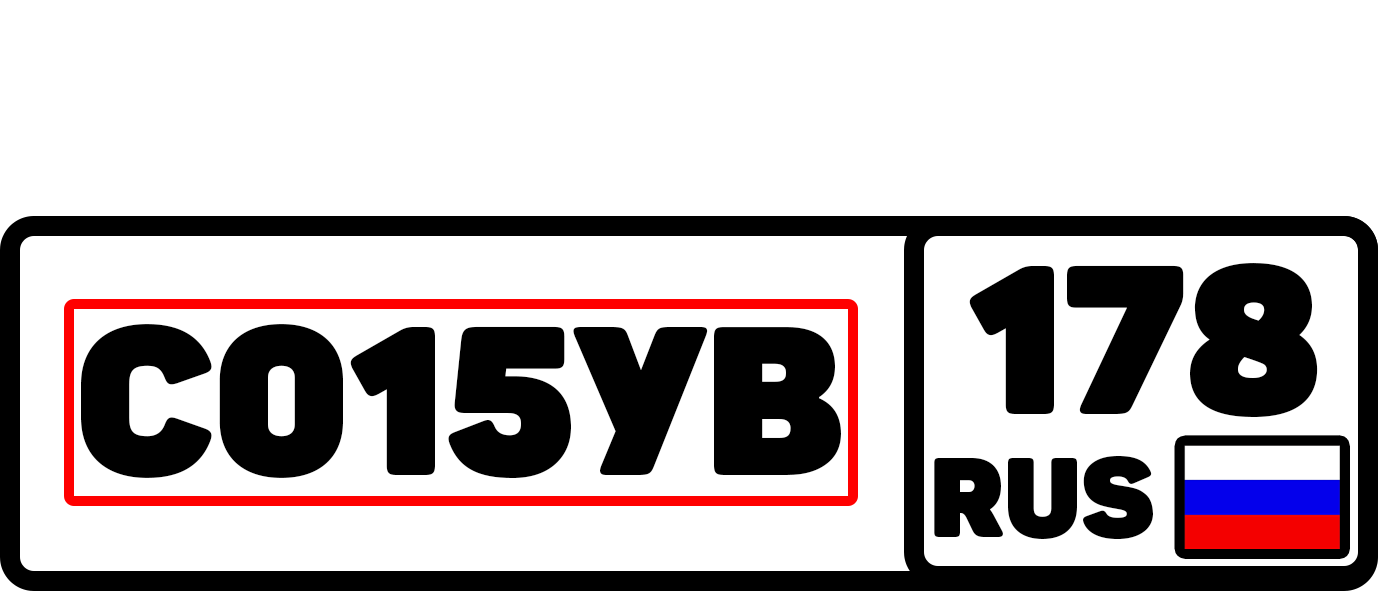
<style>
.page{position:relative;width:1378px;height:591px;background:#ffffff}
.page>*{position:absolute;margin:0}
.t1{font:208.3px "Panton-ExtraBlack";color:#000000;text-transform:uppercase}
.t2{font:111.1px "Panton-ExtraBlack";color:#000000;text-transform:uppercase}
</style>
<div class="page">
<p class="t1" style="left:969px;top:263px;width:349px;height:154px">178</p>
<p class="t1" style="left:81px;top:324px;width:760px;height:154px">С015УВ</p>
<p class="t2" style="left:934px;top:455px;width:219px;height:84px">RUS</p>
</div>
